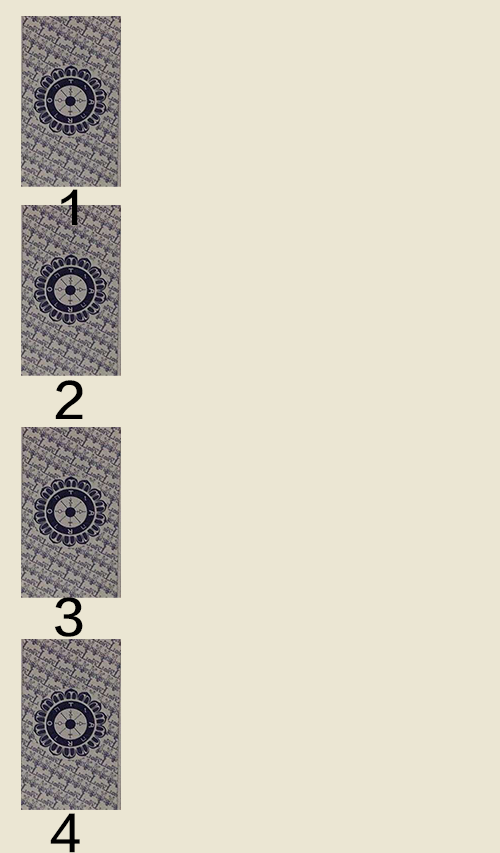
<style>
.page{position:relative;width:500px;height:853px;background:#ebe6d3}
.page>*{position:absolute;margin:0}
.t1{font:44px "FZLTZHK--GBK1-0";color:#000000}
.t2{font:48px "FZLTZHK--GBK1-0";color:#000000}
</style>
<div class="page">
<p class="t1" style="left:61px;top:189px;width:17px;height:36px">1</p>
<p class="t2" style="left:55px;top:380px;width:28px;height:39px">2</p>
<p class="t2" style="left:54px;top:597px;width:29px;height:40px">3</p>
<p class="t2" style="left:50px;top:813px;width:30px;height:40px">4</p>
</div>
